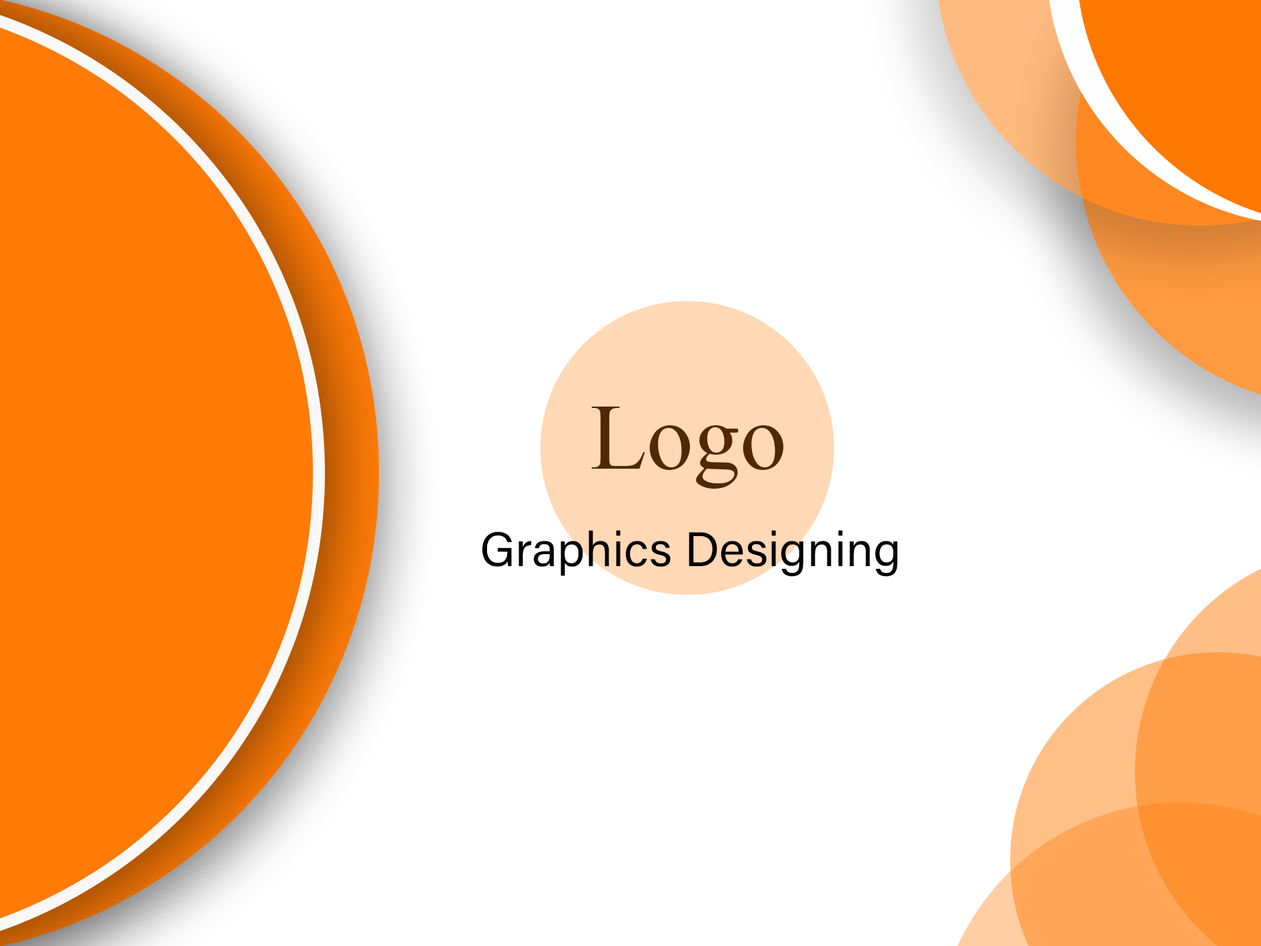
<style>
.page{position:relative;width:1261px;height:946px;background:#ffffff}
.page>*{position:absolute;margin:0}
.t1{font:93.3px "TimesNewRomanPSMT";color:#502804}
.t2{font:48.6px "AcuminConcept-Regular";color:#040404}
</style>
<div class="page">
<p class="t1" style="left:591px;top:406px;width:193px;height:82px">Logo</p>
<p class="t2" style="left:482px;top:530px;width:415px;height:47px">Graphics Designing</p>
</div>
